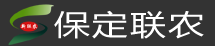
<style>
.page{position:relative;width:215px;height:46px;background:#333333}
.page>*{position:absolute;margin:0}
.t1{font:28.8px "MicrosoftYaHei";letter-spacing:0.06em;color:#ffffff;text-transform:uppercase;scale:1.25 1}
</style>
<div class="page">
<p class="t1" style="left:54px;top:10px;width:150px;height:29px">保定联农</p>
</div>
